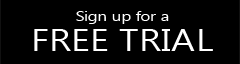
<style>
.page{position:relative;width:240px;height:64px;background:#000000}
.page>*{position:absolute;margin:0}
.t1{font:14px "SegoeUISymbol";color:#ffffff;scale:1.2 1}
.t2{font:31px "SegoeUISymbol";color:#ffffff;scale:1.2 1}
</style>
<div class="page">
<p class="t1" style="left:76px;top:11px;width:93px;height:13px">Sign up for a</p>
<p class="t2" style="left:34px;top:29px;width:179px;height:22px">FREE TRIAL</p>
</div>
